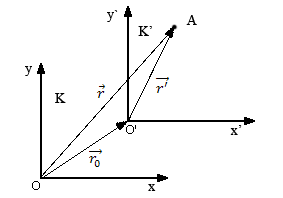
<style>
.page{position:relative;width:283px;height:198px;background:#ffffff}
.page>*{position:absolute;margin:0}
.t1{font:14px "TimesNewRomanPSMT";color:#000000}
</style>
<div class="page">
<p class="t1" style="left:107px;top:10px;width:11px;height:12px">y`</p>
<p class="t1" style="left:186px;top:15px;width:11px;height:10px">A</p>
<p class="t1" style="left:138px;top:26px;width:14px;height:10px">K’</p>
<p class="t1" style="left:25px;top:66px;width:7px;height:10px">y</p>
<p class="t1" style="left:55px;top:93px;width:11px;height:10px">K</p>
<p class="t1" style="left:230px;top:125px;width:12px;height:10px">x’</p>
<p class="t1" style="left:148px;top:184px;width:8px;height:7px">x</p>
</div>
